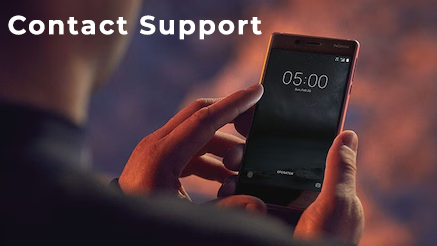
<style>
.page{position:relative;width:437px;height:246px}
.page>*{position:absolute;margin:0}
.t1{font:26px "Montserrat-Bold";letter-spacing:0.08em;color:#ffffff}
</style>
<div class="page">
<p class="t1" style="left:8px;top:15px;width:254px;height:25px">Contact Support</p>
</div>
